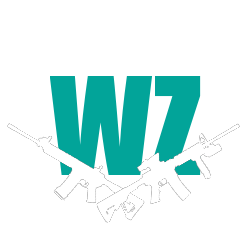
<style>
.page{position:relative;width:250px;height:250px;background:#ffffff}
.page>*{position:absolute;margin:0}
.t1{font:125px "Impact";color:#02a499}
</style>
<div class="page">
<p class="t1" style="left:50px;top:76px;width:151px;height:99px">WZ</p>
</div>
